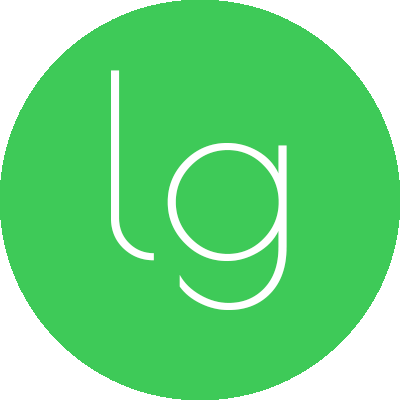
<style>
.page{position:relative;width:400px;height:400px;background:#3eca58}
.page>*{position:absolute;margin:0}
.t1{font:250px "PoiretOne-Regular";color:#ffffff}
</style>
<div class="page">
<p class="t1" style="left:111px;top:70px;width:176px;height:240px">lg</p>
</div>
